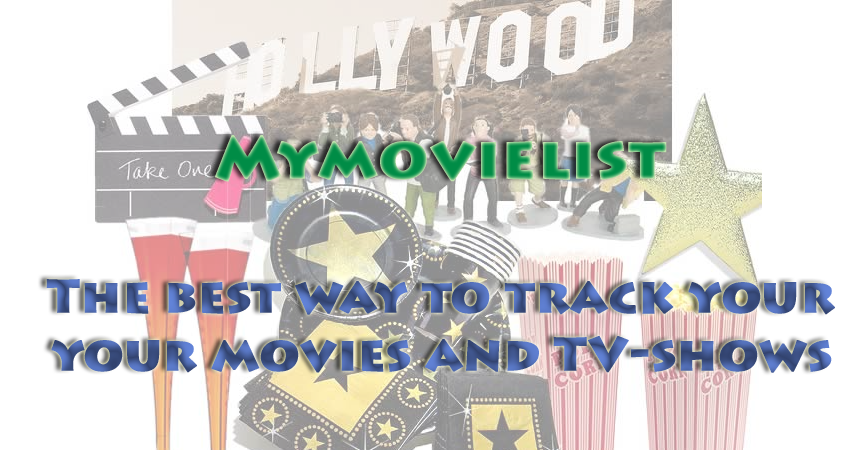
<style>
.page{position:relative;width:850px;height:450px;background:#ffffff}
.page>*{position:absolute;margin:0}
.t1{font:60px "LithosPro-Black";font-weight:bold}
.t2{font:48px "LithosPro-Black";font-weight:bold}
</style>
<div class="page">
<p class="t1" style="left:215px;top:135px;width:452px;height:47px">Mymovielist</p>
<p class="t2" style="left:46px;top:279px;width:789px;height:94px;text-align:center">The best way to track your<br>your movies and TV-shows</p>
</div>
